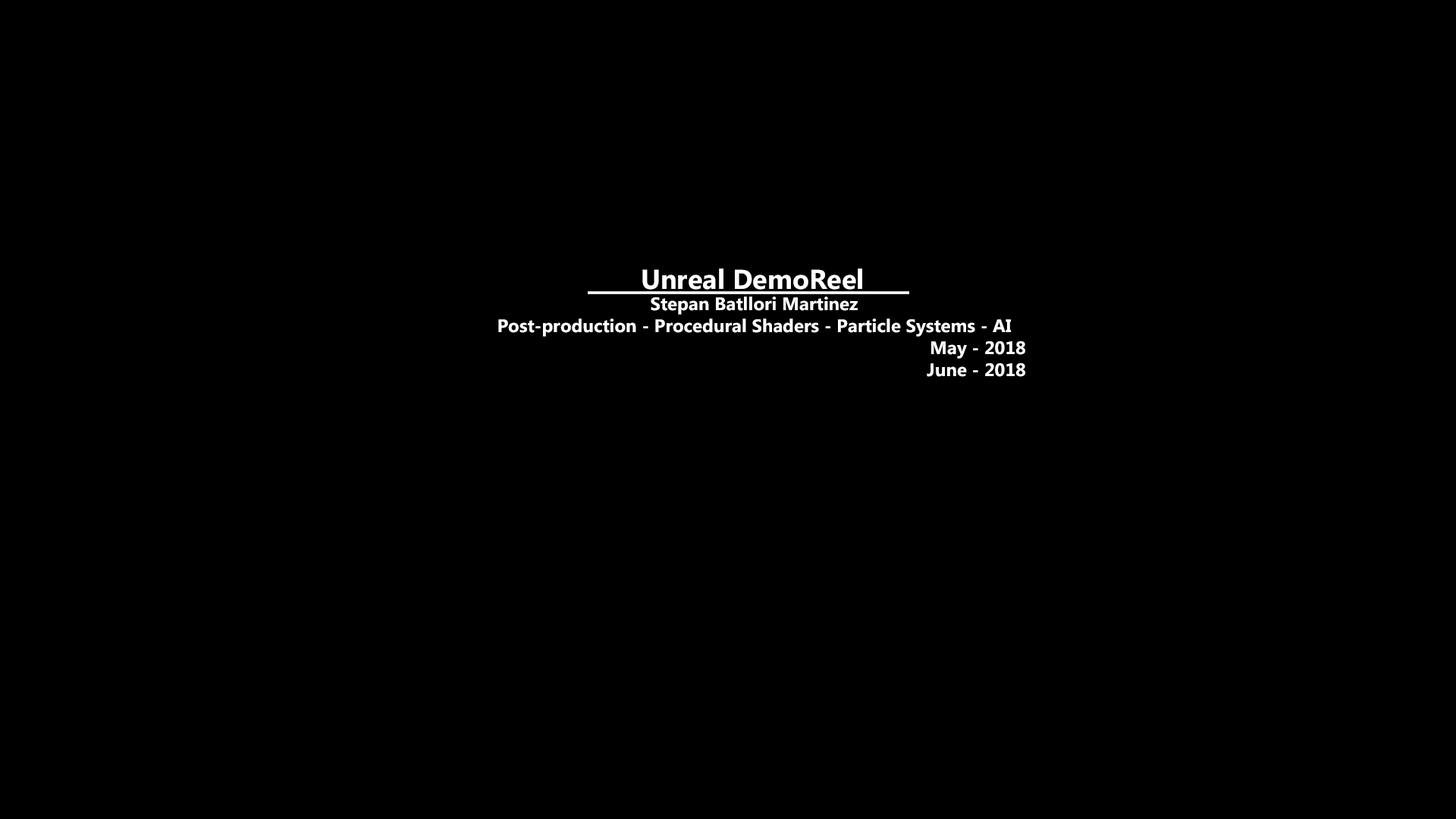
<style>
.page{position:relative;width:1456px;height:819px;background:#000000}
.page>*{position:absolute;margin:0}
.t1{font:18.2px "MicrosoftPhagsPa-Bold";color:#ffffff}
.t2{font:27.3px "MicrosoftPhagsPa-Bold";color:#ffffff}
.t3{font:27.3px "MicrosoftPhagsPa-Bold";color:#ffffff;text-decoration:underline}
</style>
<div class="page">
<p class="t1" style="left:498px;top:268px;width:527px;height:109px"><span class="t2">              </span><span class="t3">       Unreal DemoReel      <br></span>Stepan Batllori Martinez<br>Post-production - Procedural Shaders - Particle Systems - AI<br>May - 2018<br>June - 2018</p>
</div>
